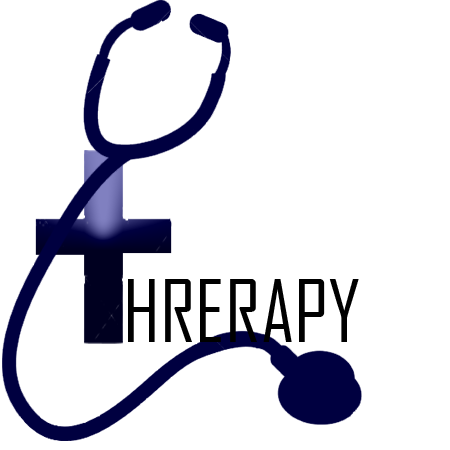
<style>
.page{position:relative;width:450px;height:450px;background:#ffffff}
.page>*{position:absolute;margin:0}
.t1{font:83.3px "AgencyFB-Reg";color:#000000}
</style>
<div class="page">
<p class="t1" style="left:128px;top:279px;width:231px;height:63px">HRERAPY</p>
</div>
